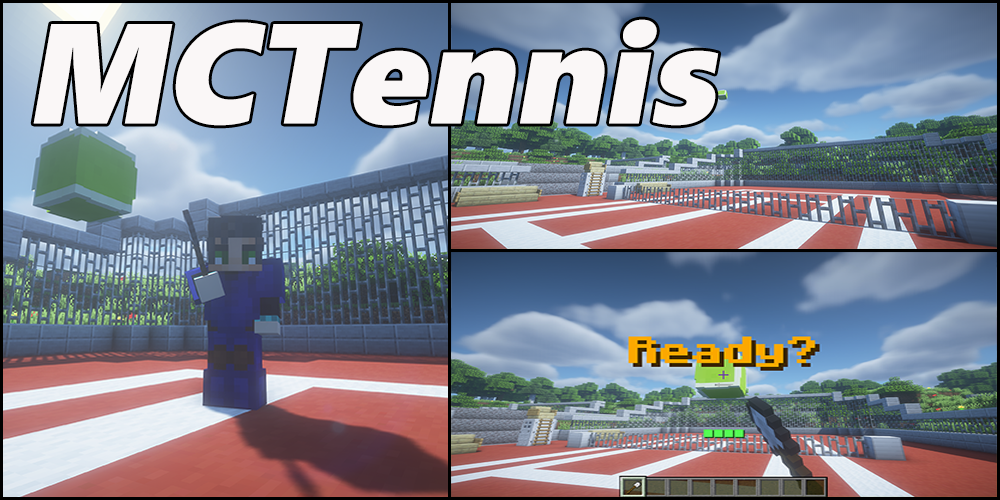
<style>
.page{position:relative;width:1000px;height:500px}
.page>*{position:absolute;margin:0}
.t1{font:141.7px "SegoeUIBlack";color:#faf7f7;font-style:italic}
</style>
<div class="page">
<p class="t1" style="left:33px;top:19px;width:686px;height:107px">MCTennis</p>
</div>
